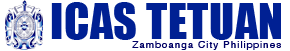
<style>
.page{position:relative;width:290px;height:51px;background:#ffffff}
.page>*{position:absolute;margin:0}
.t1{font:46px "Impact";letter-spacing:0.01em;color:#002093}
.t2{font:10px "Helvetica";letter-spacing:0.1em;color:#000064}
</style>
<div class="page">
<p class="t1" style="left:51px;top:2px;width:230px;height:38px">ICAS TETUAN</p>
<p class="t2" style="left:132px;top:41px;width:149px;height:9px">Zamboanga City Philippines</p>
</div>
